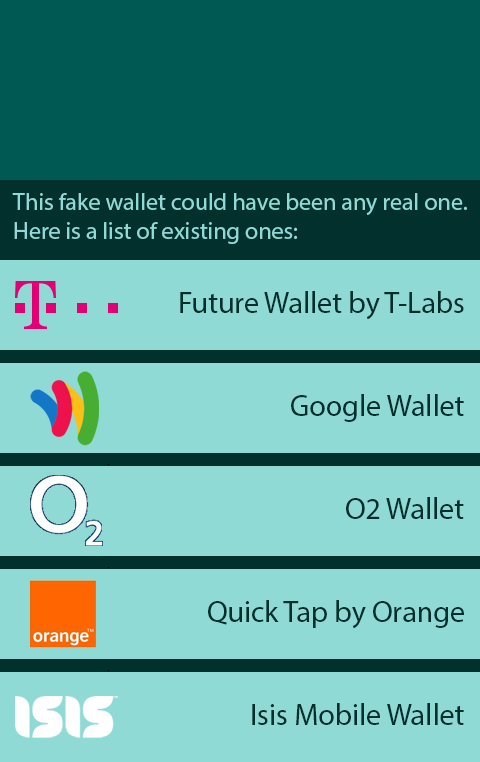
<style>
.page{position:relative;width:480px;height:762px;background:#8fdad5}
.page>*{position:absolute;margin:0}
.t1{font:24px "MyriadPro-Regular";color:#8fdad5}
.t2{font:30px "MyriadPro-Regular";color:#022f2c}
</style>
<div class="page">
<p class="t1" style="left:12px;top:193px;width:455px;height:51px">This fake wallet could have been any real one. <br>Here is a list of existing ones:</p>
<p class="t2" style="left:180px;top:291px;width:284px;height:29px">Future Wallet by T-Labs</p>
<p class="t2" style="left:291px;top:394px;width:173px;height:28px">Google Wallet</p>
<p class="t2" style="left:346px;top:497px;width:118px;height:22px">O2 Wallet</p>
<p class="t2" style="left:208px;top:600px;width:256px;height:29px">Quick Tap by Orange</p>
<p class="t2" style="left:252px;top:703px;width:212px;height:22px">Isis Mobile Wallet</p>
</div>
